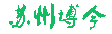
<style>
.page{position:relative;width:112px;height:34px;background:#ffffff}
.page>*{position:absolute;margin:0}
.t1{font:25px "2.0-";color:#12bc62}
</style>
<div class="page">
<p class="t1" style="left:9px;top:3px;width:97px;height:27px">苏州博今</p>
</div>
